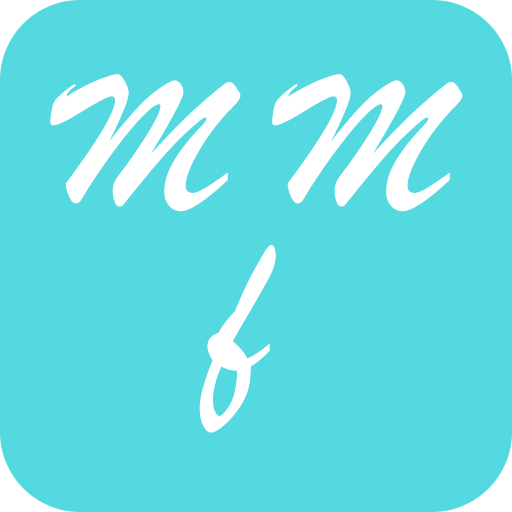
<style>
.page{position:relative;width:512px;height:512px;background:#54d9e0}
.page>*{position:absolute;margin:0}
.t1{font:200px "LiuJian-Mao-Cao-2.0";color:#ffffff}
.t2{font:220px "LiuJian-Mao-Cao-2.0";color:#ffffff}
</style>
<div class="page">
<p class="t1" style="left:50px;top:74px;width:413px;height:138px">M M</p>
<p class="t2" style="left:199px;top:245px;width:77px;height:188px">f</p>
</div>
